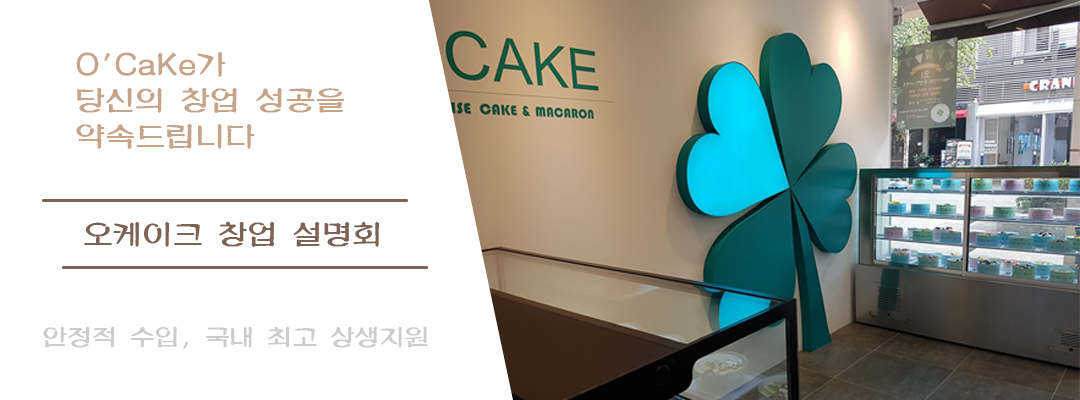
<style>
.page{position:relative;width:1080px;height:400px;background:#ffffff}
.page>*{position:absolute;margin:0}
.t1{font:30px "MDArt";color:#c5a48a}
.t2{font:30px "MDArt";color:#7c6354}
.t3{font:25px "MDArt";color:#cccccc}
</style>
<div class="page">
<p class="t1" style="left:76px;top:52px;width:269px;height:97px">O'CaKe가<br>당신의 창업 성공을<br>약속드립니다</p>
<p class="t2" style="left:84px;top:221px;width:295px;height:26px">오케이크 창업 설명회</p>
<p class="t3" style="left:43px;top:326px;width:385px;height:23px">안정적 수입, 국내 최고 상생지원</p>
</div>
